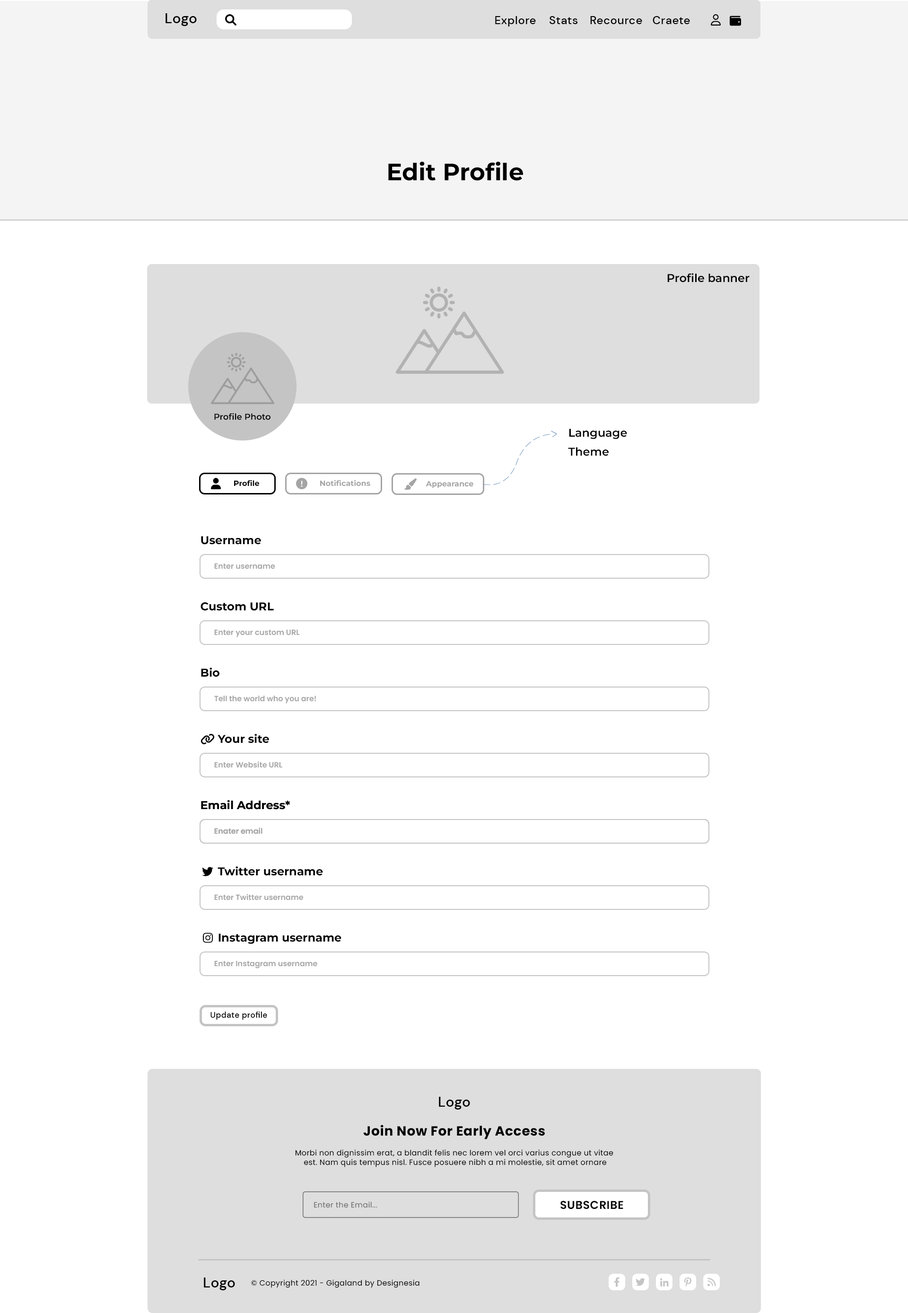
<style>
.page{position:relative;width:908px;height:1313px;background:#ffffff}
.page>*{position:absolute;margin:0}
.t1{font:14.2px "DMSans-Medium";letter-spacing:0.025em;color:#000000}
.t2{font:11.4px "DMSans-Medium";letter-spacing:0.025em;color:#000000}
.t3{font:23.7px "Montserrat-Bold";color:#000000}
.t4{font:11.4px "Montserrat-SemiBold";color:#000000}
.t5{font:8.5px "Montserrat-SemiBold";color:#000000}
.t6{font:7.6px "Montserrat-Bold";color:#000000}
.t7{font:7.6px "Montserrat-Bold";color:#a4a4a4}
.t8{font:11.4px "Montserrat-Bold";color:#000000}
.t9{font:7.6px "Poppins-SemiBold";color:#a5a5a5}
.t10{font:8.1px "DMSans-Medium";letter-spacing:0.025em;color:#000000}
.t11{font:13.2px "Poppins-Bold";letter-spacing:0.025em;color:#000000}
.t12{font:7.6px "Poppins-Regular";letter-spacing:0.025em;color:#000000}
.t13{font:7.6px "Poppins-Regular";letter-spacing:0.025em;color:#6d6d6d}
.t14{font:11.4px "Poppins-SemiBold";letter-spacing:0.025em;color:#000000;text-transform:uppercase}
</style>
<div class="page">
<p class="t1" style="left:166px;top:13px;width:31px;height:13px">Logo</p>
<p class="t2" style="left:495px;top:16px;width:41px;height:10px">Explore</p>
<p class="t2" style="left:550px;top:16px;width:28px;height:8px">Stats</p>
<p class="t2" style="left:590px;top:16px;width:52px;height:8px">Recource</p>
<p class="t2" style="left:653px;top:16px;width:37px;height:8px">Craete</p>
<p class="t3" style="left:388px;top:161px;width:135px;height:20px">Edit Profile</p>
<p class="t4" style="left:668px;top:273px;width:82px;height:9px">Profile banner</p>
<p class="t5" style="left:214px;top:413px;width:57px;height:7px">Profile Photo</p>
<p class="t4" style="left:569px;top:429px;width:58px;height:10px">Language</p>
<p class="t4" style="left:568px;top:447px;width:41px;height:9px">Theme</p>
<p class="t6" style="left:234px;top:480px;width:25px;height:6px">Profile</p>
<p class="t7" style="left:320px;top:480px;width:50px;height:6px">Notifications</p>
<p class="t7" style="left:426px;top:481px;width:48px;height:7px">Appearance</p>
<p class="t8" style="left:201px;top:536px;width:60px;height:9px">Username</p>
<p class="t9" style="left:214px;top:563px;width:61px;height:6px">Enter username</p>
<p class="t8" style="left:201px;top:602px;width:73px;height:9px">Custom URL</p>
<p class="t9" style="left:214px;top:629px;width:86px;height:8px">Enter your custom URL</p>
<p class="t8" style="left:201px;top:668px;width:19px;height:9px">Bio</p>
<p class="t9" style="left:214px;top:695px;width:102px;height:8px">Tell the world who you are!</p>
<p class="t8" style="left:218px;top:734px;width:51px;height:9px">Your site</p>
<p class="t9" style="left:214px;top:761px;width:68px;height:7px">Enter Website URL</p>
<p class="t8" style="left:201px;top:800px;width:89px;height:9px">Email Address*</p>
<p class="t8" style="left:201px;top:800px;width:89px;height:9px">Email Address*</p>
<p class="t9" style="left:214px;top:827px;width:49px;height:7px">Enater email</p>
<p class="t9" style="left:214px;top:827px;width:49px;height:7px">Enater email</p>
<p class="t8" style="left:218px;top:866px;width:105px;height:10px">Twitter username</p>
<p class="t9" style="left:214px;top:894px;width:89px;height:6px">Enter Twitter username</p>
<p class="t8" style="left:219px;top:933px;width:123px;height:11px">Instagram username</p>
<p class="t9" style="left:214px;top:960px;width:103px;height:8px">Enter Instagram username</p>
<p class="t10" style="left:211px;top:1011px;width:56px;height:8px">Update profile</p>
<p class="t1" style="left:439px;top:1097px;width:31px;height:12px">Logo</p>
<p class="t11" style="left:363px;top:1125px;width:182px;height:14px">Join Now For Early Access</p>
<p class="t12" style="left:295px;top:1149px;width:319px;height:18px;text-align:center">Morbi non dignissim erat, a blandit felis nec lorem vel orci varius congue ut vitae <br>est. Nam quis tempus nisl. Fusce posuere nibh a mi molestie, sit amet ornare</p>
<p class="t13" style="left:314px;top:1201px;width:64px;height:7px">Enter the Email...</p>
<p class="t14" style="left:561px;top:1201px;width:63px;height:8px">Subscribe</p>
<p class="t1" style="left:204px;top:1277px;width:31px;height:13px">Logo</p>
<p class="t12" style="left:251px;top:1279px;width:169px;height:9px">© Copyright 2021 - Gigaland by Designesia</p>
</div>
